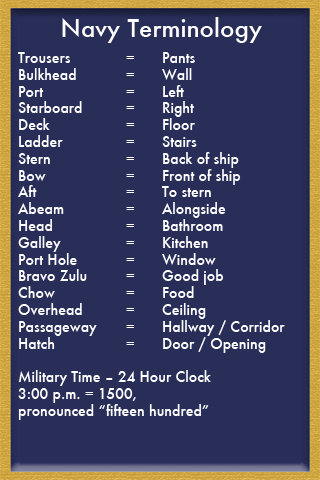
<style>
.page{position:relative;width:320px;height:480px;background:#292e59}
.page>*{position:absolute;margin:0}
.t1{font:24px "Futura-Medium";color:#ffffff}
.t2{font:14px "Futura-Medium";color:#ffffff}
</style>
<div class="page">
<p class="t1" style="left:62px;top:17px;width:200px;height:26px">Navy Terminology</p>
<p class="t2" style="left:18px;top:52px;width:267px;height:368px">Trousers  = Pants <br>Bulkhead  = Wall <br>Port   =  Left<br>Starboard  = Right <br>Deck   = Floor <br>Ladder  =  Stairs<br>Stern   = Back of ship <br>Bow   = Front of ship <br>Aft   = To stern<br>Abeam  = Alongside <br>Head   = Bathroom <br>Galley  = Kitchen<br>Port Hole  = Window <br>Bravo Zulu  = Good job  <br>Chow  = Food<br>Overhead  = Ceiling <br>Passageway = Hallway / Corridor <br>Hatch  = Door / Opening<br><br>Military Time – 24 Hour Clock <br>3:00 p.m. = 1500, <br>pronounced “fifteen hundred”</p>
</div>
